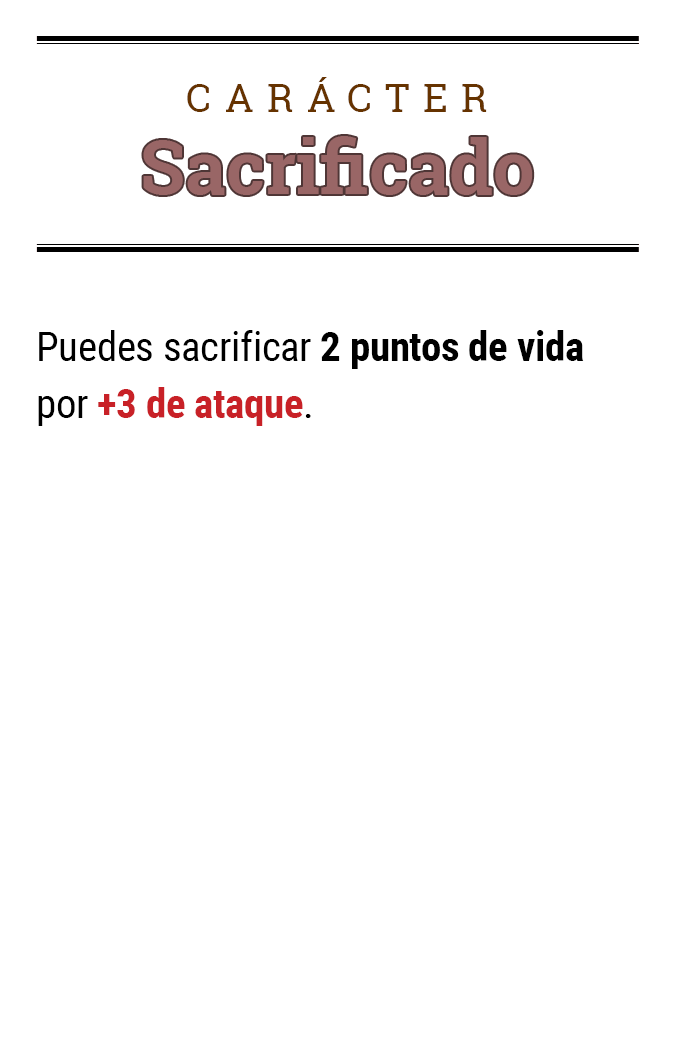
<style>
.page{position:relative;width:675px;height:1050px;background:#ffffff}
.page>*{position:absolute;margin:0}
.t1{font:39.2px "RobotoSlab-Regular";letter-spacing:0.34em;color:#663300}
.t2{font:74.5px "RobotoSlab-Bold";color:#996666}
.t3{font:41.1px/57.1px "RobotoCondensed-Regular";letter-spacing:-0.01em;color:#000000}
.t4{font:41.1px/57.1px "RobotoCondensed-Bold";letter-spacing:-0.01em;color:#000000}
.t5{font:41.1px/57.1px "RobotoCondensed-Bold";letter-spacing:-0.01em;color:#c82127}
</style>
<div class="page">
<p class="t1" style="left:187px;top:77px;width:300px;height:35px">CARÁCTER</p>
<p class="t2" style="left:143px;top:136px;width:390px;height:59px">Sacrificado</p>
<p class="t3" style="left:38px;top:330px;width:546px;height:96px">Puedes sacrificar <span class="t4">2 puntos de vida</span> por <span class="t5">+3 de ataque</span>.</p>
</div>
